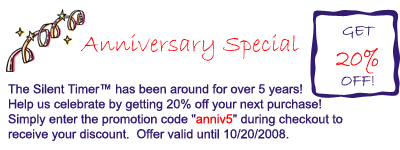
<style>
.page{position:relative;width:400px;height:150px;background:#ffffff}
.page>*{position:absolute;margin:0}
.t1{font:16.7px "BradleyHandITC";color:#331b72}
.t2{font:25px "BradleyHandITC";color:#ff0000}
.t3{font:12.5px "ArialMT";color:#331b72}
.t4{font:12.5px "ArialMT";color:#ff0000}
</style>
<div class="page">
<p class="t1" style="left:336px;top:26px;width:42px;height:61px;text-align:center">GET<br><span class="t2">20%<br></span>OFF!</p>
<p class="t2" style="left:81px;top:34px;width:218px;height:27px">Anniversary Special</p>
<p class="t3" style="left:8px;top:84px;width:335px;height:57px">The Silent Timer™ has been around for over 5 years! <br>Help us celebrate by getting 20% off your next purchase! <br>Simply enter the promotion code "<span class="t4">anniv5</span>" during checkout to <br>receive your discount.  Offer valid until 10/20/2008.</p>
</div>
